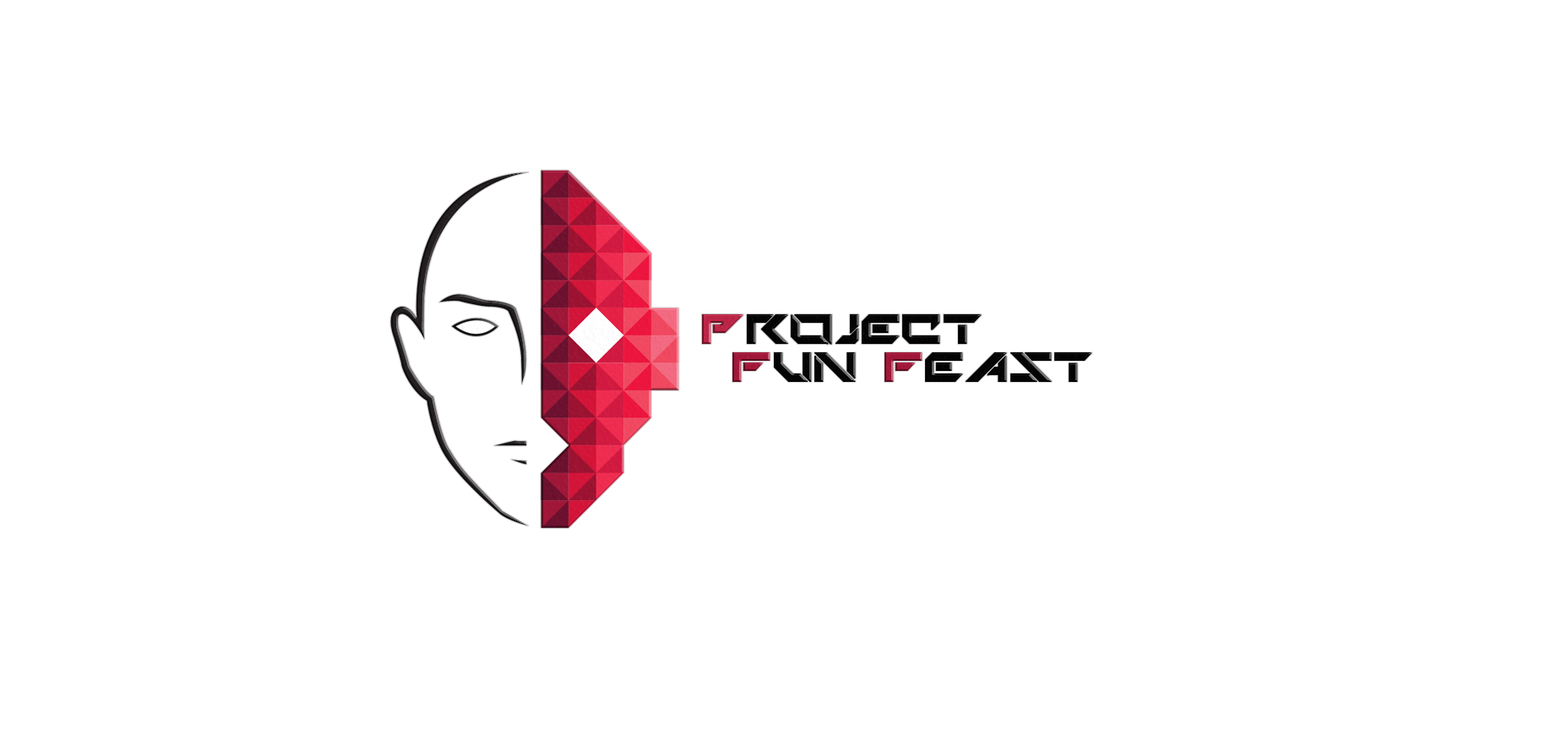
<style>
.page{position:relative;width:1568px;height:730px;background:#ffffff}
.page>*{position:absolute;margin:0}
.t1{font:57.4px "TechnoHideo";color:#030303;text-transform:uppercase;font-weight:bold}
.t2{font:57.4px "TechnoHideo";color:#bc2445;text-transform:uppercase;font-weight:bold}
.t3{font:57.4px "TechnoHideo";color:#a11638;text-transform:uppercase;font-weight:bold}
</style>
<div class="page">
<p class="t1" style="left:702px;top:314px;width:280px;height:31px"><span class="t2">p</span>roject</p>
<p class="t1" style="left:732px;top:352px;width:360px;height:30px"><span class="t3">f</span>un <span class="t3">f</span>east</p>
</div>
